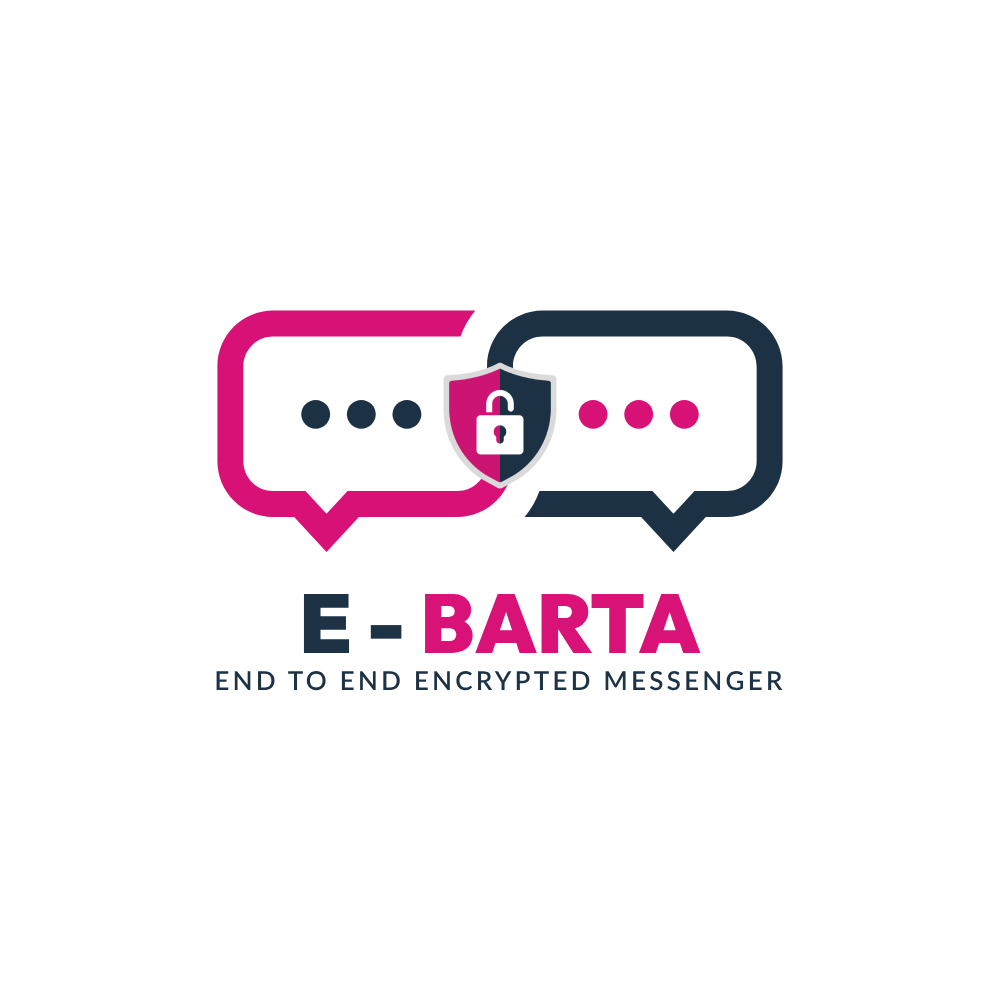
<style>
.page{position:relative;width:1000px;height:1000px;background:#ffffff}
.page>*{position:absolute;margin:0}
.t1{font:82.8px "Outfit-Black";color:#d91277;text-transform:uppercase}
.t2{font:82.8px "Outfit-Black";color:#1d3244;text-transform:uppercase}
.t3{font:26px "Lato-Semibold";letter-spacing:0.125em;color:#1d3244;text-transform:uppercase}
.t4{font:26px "Lato-Semibold";letter-spacing:0.125em;color:#cc1572;text-transform:uppercase}
</style>
<div class="page">
<p class="t1" style="left:303px;top:594px;width:398px;height:59px"><span class="t2">E - </span>Barta</p>
<p class="t3" style="left:216px;top:671px;width:567px;height:20px"><span class="t4">E</span>ND To END ENCRYPTED mESSENGER</p>
</div>
